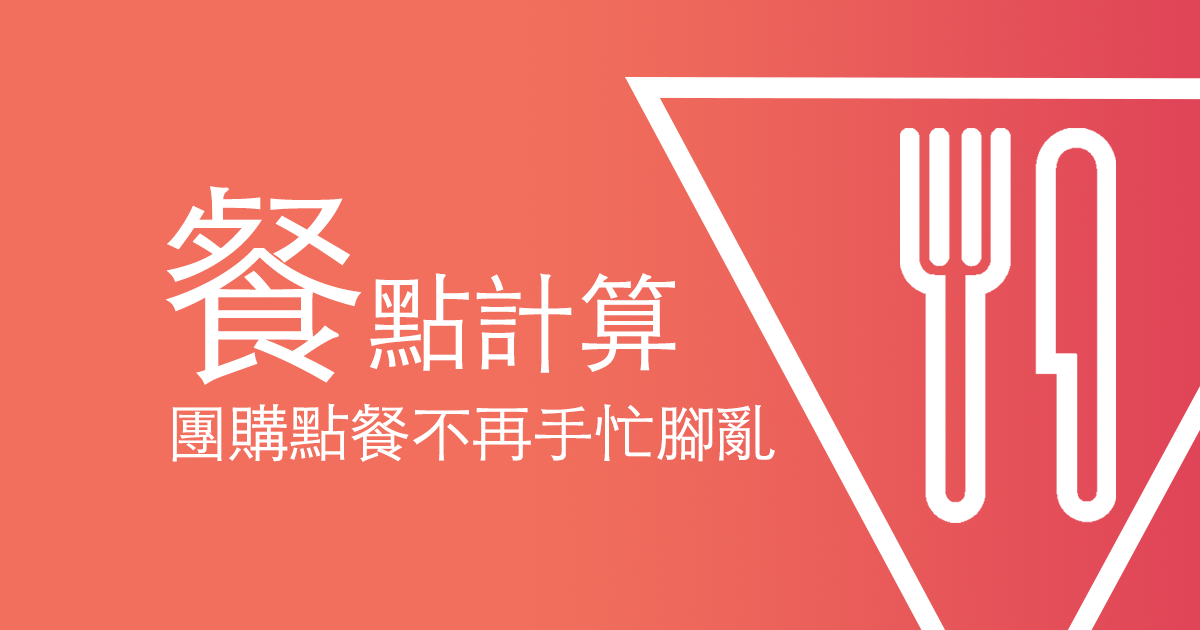
<style>
.page{position:relative;width:1200px;height:630px;background:#f16f5c}
.page>*{position:absolute;margin:0}
.t1{font:106.7px "STHeitiTC-Light";letter-spacing:-0.02em;color:#ffffff}
.t2{font:213.3px "STHeitiTC-Light";letter-spacing:-0.02em;color:#ffffff}
.t3{font:62.2px "STHeitiTC-Light";letter-spacing:-0.02em;color:#ffffff}
</style>
<div class="page">
<p class="t1" style="left:165px;top:186px;width:511px;height:199px"><span class="t2">餐</span>點計算</p>
<p class="t3" style="left:172px;top:403px;width:603px;height:59px">團購點餐不再手忙腳亂</p>
</div>
